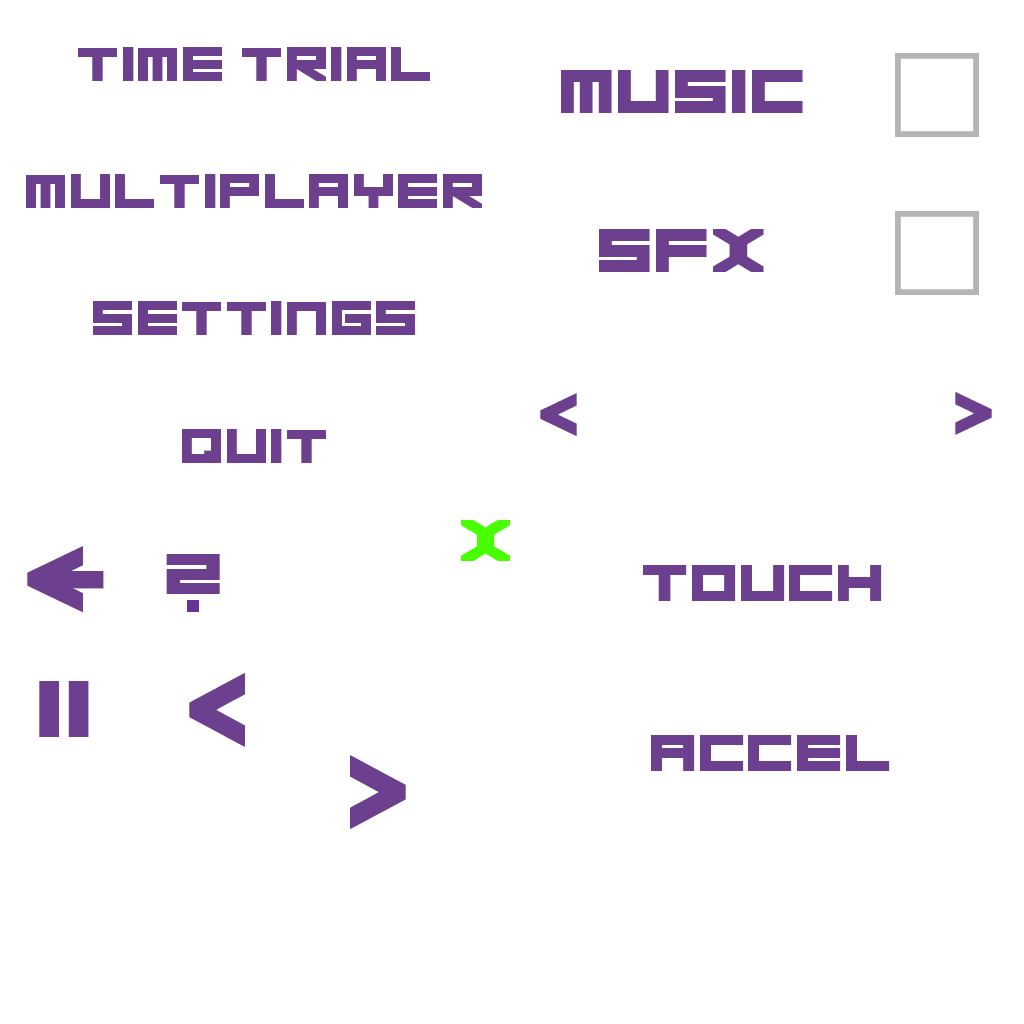
<style>
.page{position:relative;width:1024px;height:1024px;background:#ffffff}
.page>*{position:absolute;margin:0}
.t1{font:47.5px "Basicav.2012";letter-spacing:0.06em;color:#6c408f}
.t2{font:60.6px "Basicav.2012";letter-spacing:0.06em;color:#6c408f}
.t3{font:15.6px "Basicav.2012";letter-spacing:0.06em;color:#6c408f}
.t4{font:58.8px "Basicav.2012";letter-spacing:0.06em;color:#48ff00}
.t5{font:79.7px "Basicav.2012";letter-spacing:0.06em;color:#6c408f}
.t6{font:56.9px "Basicav.2012";letter-spacing:0.06em;color:#6c408f;scale:1.12 1}
.t7{font:51.9px "Basicav.2012";letter-spacing:0.06em;color:#6c408f}
.t8{font:79.6px "Basicav.2012";letter-spacing:0.06em;color:#6c408f}
.t9{font:79.7px "Basicav.2012";letter-spacing:0.06em;color:#6c408f;scale:1.12 1}
.t10{font:80px "Basicav.2012";letter-spacing:0.06em;color:#6c408f;scale:1.12 1}
</style>
<div class="page">
<p class="t1" style="left:78px;top:47px;width:352px;height:34px">TIME TRIAL</p>
<p class="t2" style="left:561px;top:70px;width:242px;height:43px">music</p>
<p class="t1" style="left:26px;top:174px;width:456px;height:34px">MULTIPLAYER</p>
<p class="t2" style="left:599px;top:229px;width:165px;height:43px">SFX</p>
<p class="t1" style="left:93px;top:301px;width:322px;height:34px">SETTINGS</p>
<p class="t3" style="left:540px;top:393px;width:37px;height:44px;rotate:90deg">V</p>
<p class="t3" style="left:955px;top:391px;width:37px;height:44px;rotate:-90deg">V</p>
<p class="t1" style="left:182px;top:429px;width:144px;height:34px">QUIT</p>
<p class="t4" style="left:461px;top:520px;width:49px;height:41px">X</p>
<p class="t5" style="left:27px;top:546px;width:56px;height:67px;rotate:90deg">v</p>
<p class="t6" style="left:166px;top:554px;width:54px;height:40px;rotate:180deg">S</p>
<p class="t7" style="left:643px;top:565px;width:239px;height:36px">TOUCH</p>
<p class="t8" style="left:47px;top:571px;width:57px;height:18px;rotate:90deg">i</p>
<p class="t9" style="left:189px;top:672px;width:56px;height:75px;rotate:-90deg">V</p>
<p class="t10" style="left:39px;top:681px;width:50px;height:56px;rotate:180deg">II</p>
<p class="t7" style="left:651px;top:735px;width:239px;height:36px">accel</p>
<p class="t9" style="left:350px;top:755px;width:56px;height:75px;rotate:90deg">V</p>
</div>
